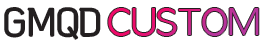
<style>
.page{position:relative;width:263px;height:47px;background:#ffffff}
.page>*{position:absolute;margin:0}
.t1{font:36.5px "VITRO-PRIDE-OTF";color:#231f20}
.t2{font:33.6px "AppleGothic";scale:1.03 1}
</style>
<div class="page">
<p class="t1" style="left:5px;top:8px;width:95px;height:31px">GMQD</p>
<p class="t2" style="left:108px;top:8px;width:151px;height:28px">CUSTOM</p>
</div>
